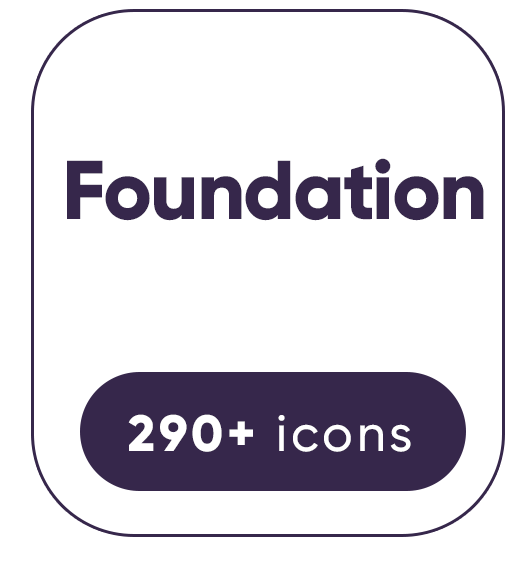
<style>
.page{position:relative;width:529px;height:561px;background:#ffffff}
.page>*{position:absolute;margin:0}
.t1{font:83.3px "Gilroy-ExtraBold";letter-spacing:-0.025em;color:#36274b}
.t2{font:50.9px "Gilroy-Medium";letter-spacing:0.075em;color:#ffffff}
.t3{font:50.9px "Gilroy-ExtraBold";letter-spacing:0.075em;color:#ffffff}
</style>
<div class="page">
<p class="t1" style="left:67px;top:158px;width:417px;height:63px">Foundation</p>
<p class="t2" style="left:128px;top:414px;width:283px;height:38px"><span class="t3">290+ </span>icons</p>
</div>
